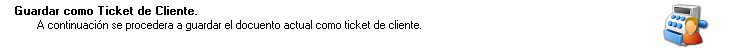
<style>
.page{position:relative;width:730px;height:52px;background:#ffffff}
.page>*{position:absolute;margin:0}
.t1{font:11.4px "MS Sans Serif";color:#000000;font-weight:bold}
.t2{font:11.4px "MS Sans Serif";color:#000000}
</style>
<div class="page">
<p class="t1" style="left:15px;top:6px;width:182px;height:9px">Guardar como Ticket de Cliente.</p>
<p class="t2" style="left:37px;top:20px;width:384px;height:11px">A continuación se procedera a guardar el docuento actual como ticket de cliente.</p>
</div>
